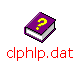
<style>
.page{position:relative;width:80px;height:80px;background:#ffffff}
.page>*{position:absolute;margin:0}
.t1{font:14px "MSReferenceSansSerif";color:#ff0000}
</style>
<div class="page">
<p class="t1" style="left:7px;top:47px;width:66px;height:14px">clphlp.dat</p>
</div>
